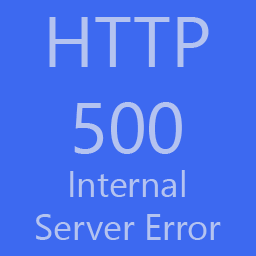
<style>
.page{position:relative;width:256px;height:256px;background:#3d69f0}
.page>*{position:absolute;margin:0}
.t1{font:36px "SegoeUI";color:#b4c3f0}
.t2{font:72px "SegoeUI";color:#b4c3f0}
</style>
<div class="page">
<p class="t1" style="left:36px;top:17px;width:185px;height:223px;text-align:center"><span class="t2">HTTP<br>500<br></span>Internal<br>Server Error</p>
</div>
